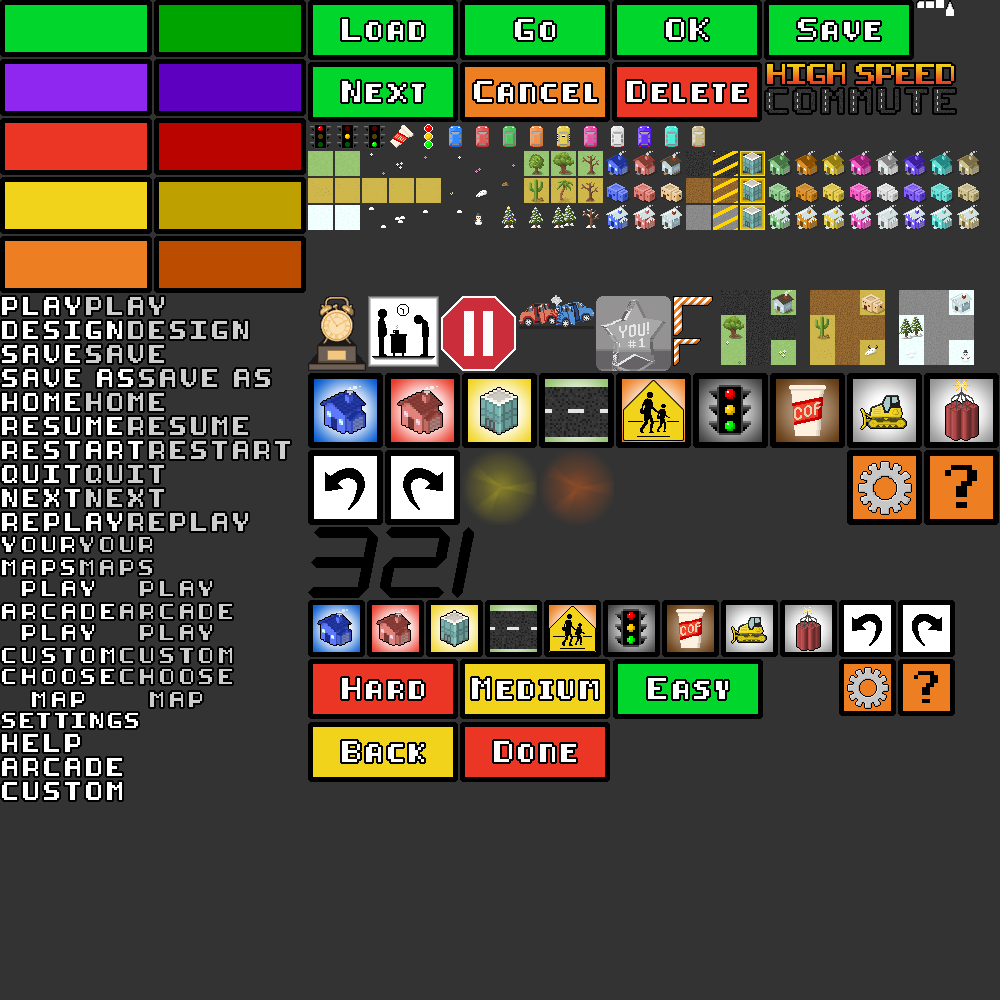
<style>
.page{position:relative;width:1000px;height:1000px;background:#333333}
.page>*{position:absolute;margin:0}
.t1{font:18px "8-bit-pusab";letter-spacing:0.2em;color:#ffffff}
.t2{font:15px "8-bit-pusab";letter-spacing:0.2em;color:#ffffff}
.t3{font:15px "8-bit-pusab";letter-spacing:0.2em;color:#cdcdcd}
.t4{font:13px/23px "8-bit-pusab";letter-spacing:0.38em;color:#ffffff}
.t5{font:13px/23px "8-bit-pusab";letter-spacing:0.38em;color:#cdcdcd}
.t6{font:13px "8-bit-pusab";letter-spacing:0.2em;color:#ffffff}
</style>
<div class="page">
<p class="t1" style="left:342px;top:19px;width:82px;height:21px">Load</p>
<p class="t1" style="left:515px;top:19px;width:40px;height:21px">Go</p>
<p class="t1" style="left:666px;top:19px;width:42px;height:21px">OK</p>
<p class="t1" style="left:798px;top:19px;width:82px;height:21px">Save</p>
<p class="t1" style="left:342px;top:81px;width:82px;height:21px">Next</p>
<p class="t1" style="left:474px;top:81px;width:123px;height:21px">Cancel</p>
<p class="t1" style="left:627px;top:81px;width:120px;height:21px">Delete</p>
<p class="t2" style="left:2px;top:297px;width:78px;height:18px">PLAY</p>
<p class="t3" style="left:86px;top:297px;width:78px;height:18px">PLAY</p>
<p class="t2" style="left:2px;top:321px;width:120px;height:18px">DESIGN</p>
<p class="t3" style="left:128px;top:321px;width:120px;height:18px">DESIGN</p>
<p class="t2" style="left:2px;top:345px;width:78px;height:18px">SAVE</p>
<p class="t3" style="left:86px;top:345px;width:78px;height:18px">SAVE</p>
<p class="t2" style="left:2px;top:369px;width:131px;height:18px">SAVE AS</p>
<p class="t3" style="left:139px;top:369px;width:131px;height:18px">SAVE AS</p>
<p class="t2" style="left:2px;top:393px;width:78px;height:18px">HOME</p>
<p class="t3" style="left:86px;top:393px;width:78px;height:18px">HOME</p>
<p class="t2" style="left:2px;top:417px;width:120px;height:18px">RESUME</p>
<p class="t3" style="left:128px;top:417px;width:120px;height:18px">RESUME</p>
<p class="t2" style="left:2px;top:441px;width:141px;height:18px">RESTART</p>
<p class="t3" style="left:149px;top:441px;width:141px;height:18px">RESTART</p>
<p class="t2" style="left:2px;top:465px;width:78px;height:18px">QUIT</p>
<p class="t3" style="left:86px;top:465px;width:78px;height:18px">QUIT</p>
<p class="t2" style="left:2px;top:489px;width:78px;height:18px">NEXT</p>
<p class="t3" style="left:86px;top:489px;width:78px;height:18px">NEXT</p>
<p class="t2" style="left:2px;top:513px;width:120px;height:18px">REPLAY</p>
<p class="t3" style="left:128px;top:513px;width:120px;height:18px">REPLAY</p>
<p class="t4" style="left:2px;top:537px;width:72px;height:38px;text-align:center">YOUR<br>MAPS</p>
<p class="t5" style="left:80px;top:537px;width:72px;height:38px;text-align:center">YOUR<br>MAPS</p>
<p class="t4" style="left:2px;top:581px;width:112px;height:38px;text-align:center">PLAY<br>ARCADE</p>
<p class="t5" style="left:120px;top:581px;width:112px;height:38px;text-align:center">PLAY<br>ARCADE</p>
<p class="t4" style="left:2px;top:625px;width:112px;height:38px;text-align:center">PLAY<br>CUSTOM</p>
<p class="t5" style="left:120px;top:625px;width:112px;height:38px;text-align:center">PLAY<br>CUSTOM</p>
<p class="t4" style="left:2px;top:669px;width:112px;height:38px;text-align:center">CHOOSE<br>MAP</p>
<p class="t5" style="left:120px;top:669px;width:112px;height:38px;text-align:center">CHOOSE<br>MAP</p>
<p class="t1" style="left:342px;top:678px;width:82px;height:21px">Hard</p>
<p class="t1" style="left:472px;top:678px;width:126px;height:21px">Medium</p>
<p class="t1" style="left:648px;top:678px;width:80px;height:21px">Easy</p>
<p class="t6" style="left:2px;top:713px;width:136px;height:15px">SETTINGS</p>
<p class="t2" style="left:2px;top:734px;width:78px;height:18px">HELP</p>
<p class="t1" style="left:342px;top:741px;width:82px;height:21px">Back</p>
<p class="t1" style="left:494px;top:741px;width:82px;height:21px">Done</p>
<p class="t2" style="left:2px;top:758px;width:120px;height:18px">ARCADE</p>
<p class="t2" style="left:2px;top:782px;width:120px;height:18px">CUSTOM</p>
</div>
